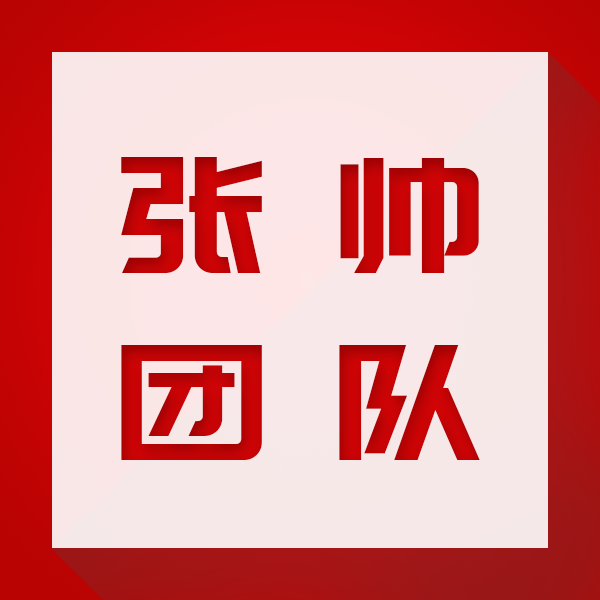
<style>
.page{position:relative;width:600px;height:600px}
.page>*{position:absolute;margin:0}
.t1{font:160px/187px "PangMenZhengDao";letter-spacing:0.44em;color:#d10305}
</style>
<div class="page">
<p class="t1" style="left:121px;top:157px;width:359px;height:303px">张帅<br>团队</p>
</div>
